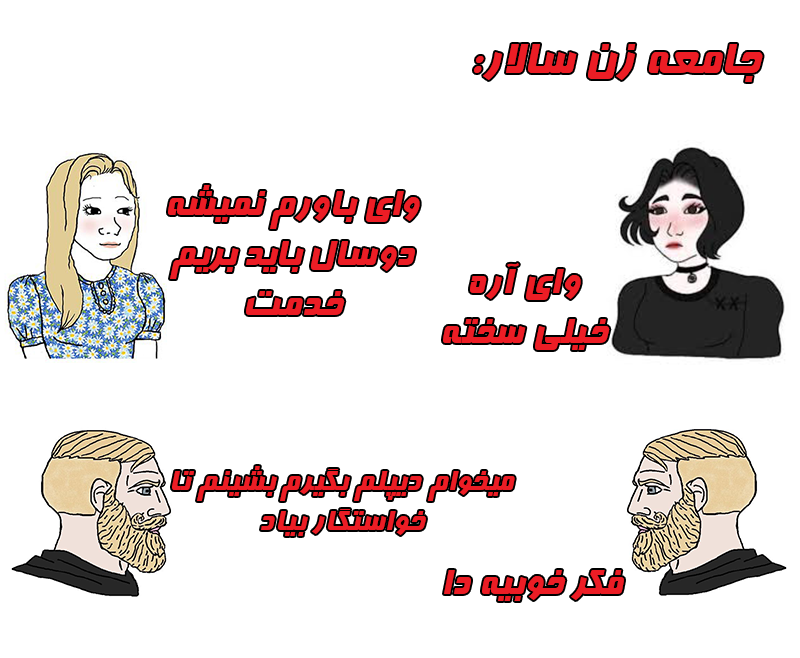
<style>
.page{position:relative;width:800px;height:658px;background:#ffffff}
.page>*{position:absolute;margin:0}
.t1{font:50px "Far.Farnaz";color:#ec1d25}
.t2{font:41.7px "Far.Farnaz";color:#ec1d25}
.t3{font:33.3px "Far.Farnaz";color:#ec1d25}
</style>
<div class="page">
<p class="t1" style="left:474px;top:44px;width:289px;height:38px">جامعه زن سالار:</p>
<p class="t2" style="left:168px;top:185px;width:252px;height:130px;text-align:center">وای باورم نمیشه دوسال باید بریم خدمت</p>
<p class="t2" style="left:443px;top:263px;width:167px;height:87px;text-align:center">وای آره خیلی سخته</p>
<p class="t3" style="left:172px;top:466px;width:343px;height:70px;text-align:center">میخوام دیپلم بگیرم بشینم تا خواستگار بیاد</p>
<p class="t2" style="left:444px;top:570px;width:180px;height:31px">فکر خوبیه دا</p>
</div>
